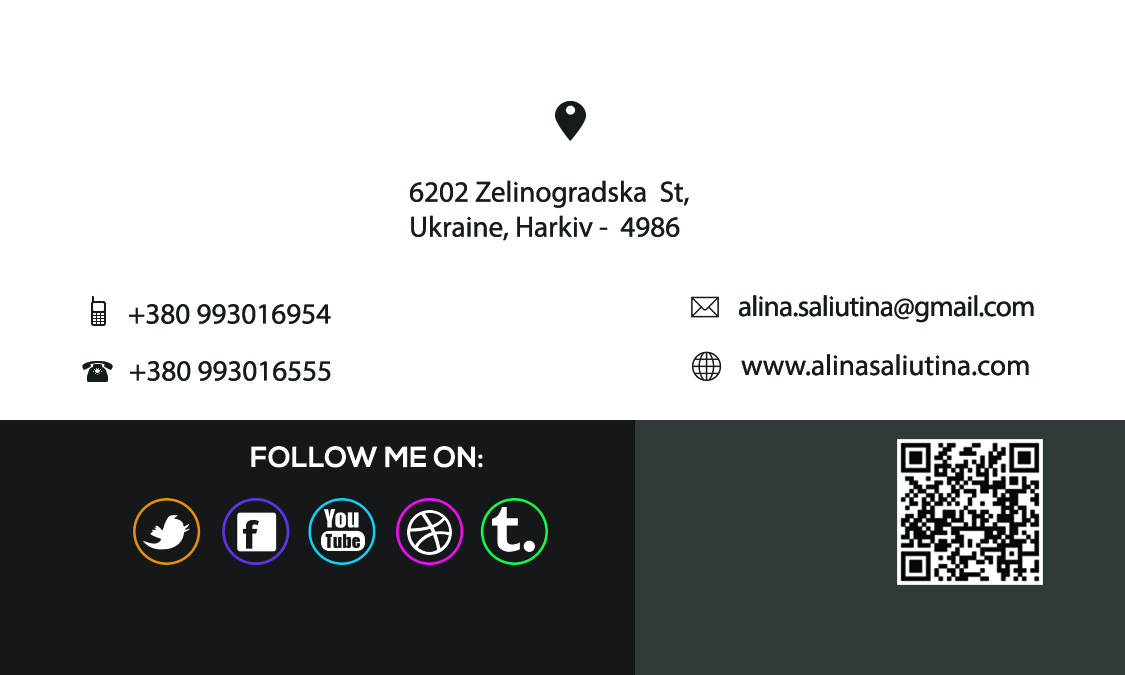
<style>
.page{position:relative;width:1125px;height:675px;background:#ffffff}
.page>*{position:absolute;margin:0}
.t1{font:29.2px "MyriadPro-Regular";color:#15191a}
.t2{font:29.2px "MyriadPro-Regular";letter-spacing:-0.025em;color:#15191a}
.t3{font:29.2px "NexaBold";color:#ffffff}
</style>
<div class="page">
<p class="t1" style="left:410px;top:180px;width:279px;height:61px">6202 Zelinogradska  St, <br>Ukraine, Harkiv -  4986</p>
<p class="t1" style="left:129px;top:304px;width:202px;height:20px">+380 993016954</p>
<p class="t2" style="left:739px;top:295px;width:295px;height:28px">alina.saliutina@gmail.com</p>
<p class="t1" style="left:130px;top:361px;width:201px;height:20px">+380 993016555</p>
<p class="t1" style="left:741px;top:354px;width:288px;height:22px">www.alinasaliutina.com</p>
<p class="t3" style="left:251px;top:446px;width:232px;height:22px">FOLLOW ME ON:</p>
</div>
